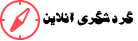
<style>
.page{position:relative;width:138px;height:41px;background:#ffffff}
.page>*{position:absolute;margin:0}
.t1{font:16px "BSiavash";color:#000000}
</style>
<div class="page">
<p class="t1" style="left:43px;top:11px;width:91px;height:15px">گردشگری آنلاین</p>
</div>
